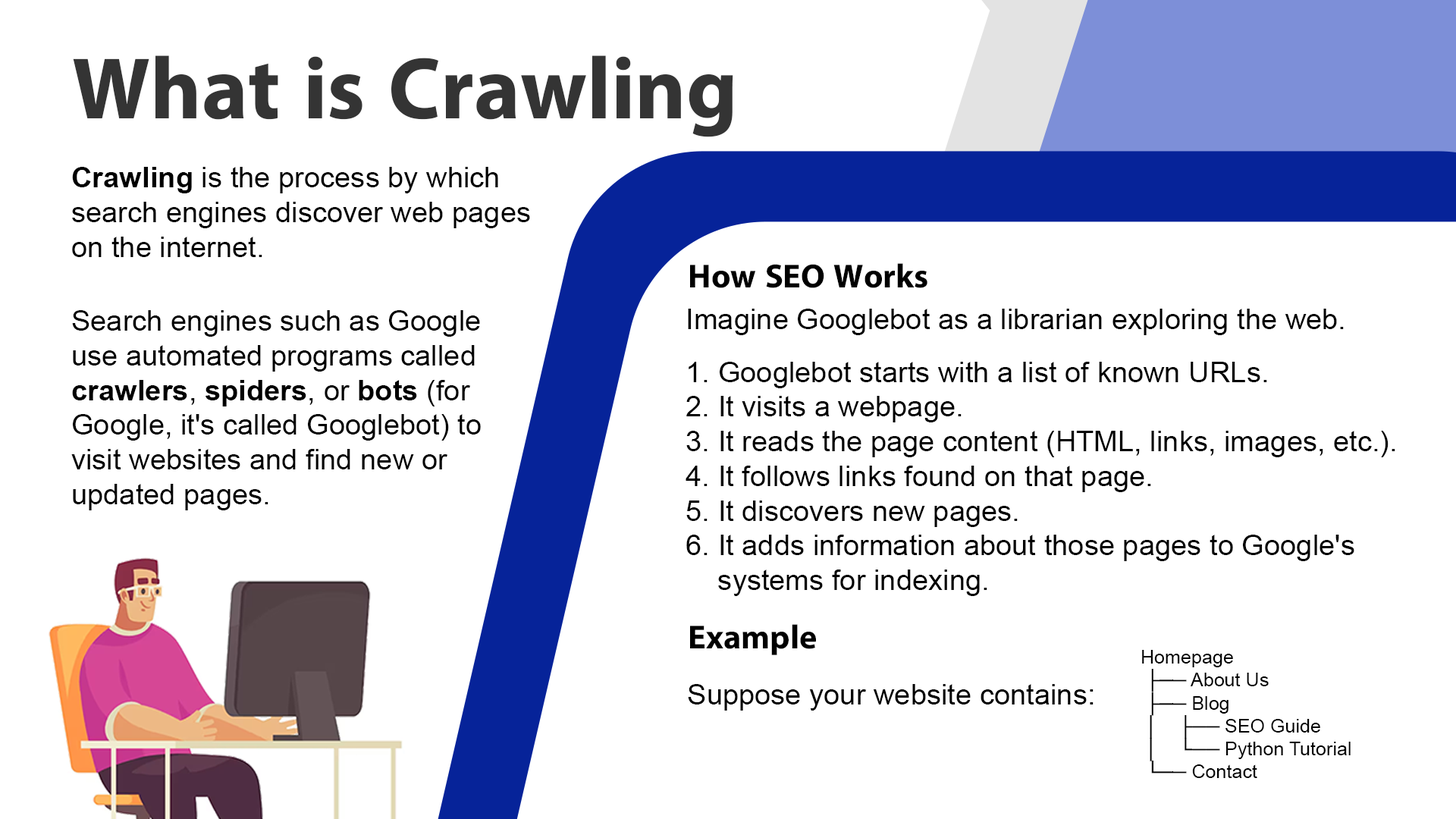
<style>
.page{position:relative;width:1456px;height:819px;background:#ffffff}
.page>*{position:absolute;margin:0}
.t1{font:88px "iKampuchea001_O'Chrov";color:#343434}
.t2{font:28.9px "ArialMT";color:#000000}
.t3{font:28.9px "Arial-BoldMT";color:#000000}
.t4{font:33.6px "iKampuchea001_O'Chrov";color:#000000}
.t5{font:19.1px "ArialMT";color:#000000}
</style>
<div class="page">
<p class="t1" style="left:73px;top:55px;width:660px;height:82px">What is Crawling</p>
<p class="t2" style="left:72px;top:167px;width:458px;height:90px"><span class="t3">Crawling</span> is the process by which <br>search engines discover web pages <br>on the internet.</p>
<p class="t4" style="left:690px;top:263px;width:237px;height:25px">How SEO Works</p>
<p class="t2" style="left:71px;top:310px;width:410px;height:200px">Search engines such as Google <br>use automated programs called <br><span class="t3">crawlers</span>, <span class="t3">spiders</span>, or <span class="t3">bots </span>(for <br>Google, it's called Googlebot) to <br>visit websites and find new or <br>updated pages.</p>
<p class="t2" style="left:688px;top:309px;width:656px;height:26px">Imagine Googlebot as a librarian exploring the web.</p>
<p class="t2" style="left:686px;top:362px;width:709px;height:234px">1. Googlebot starts with a list of known URLs.<br>2. It visits a webpage.<br>3. It reads the page content (HTML, links, images, etc.).<br>4. It follows links found on that page.<br>5. It discovers new pages.<br>6. It adds information about those pages to Google's <br>    systems for indexing.</p>
<p class="t4" style="left:690px;top:624px;width:126px;height:31px">Example</p>
<p class="t5" style="left:1142px;top:650px;width:209px;height:128px">Homepage<br> ├── About Us<br> ├── Blog<br> │    ├── SEO Guide<br> │    └── Python Tutorial<br> └── Contact</p>
<p class="t2" style="left:688px;top:684px;width:406px;height:27px">Suppose your website contains:</p>
</div>
